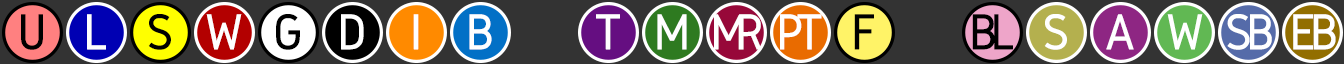
<style>
.page{position:relative;width:1344px;height:64px;background:#333333}
.page>*{position:absolute;margin:0}
.t1{font:52px "Gidole-Regular";color:#000000;font-weight:bold}
.t2{font:52px "Gidole-Regular";color:#ffffff;font-weight:bold}
.t3{font:52px "Gidole-Regular";letter-spacing:-0.23em;color:#ffffff;font-weight:bold}
.t4{font:52px "Gidole-Regular";letter-spacing:-0.16em;color:#ffffff;font-weight:bold}
.t5{font:52px "Gidole-Regular";letter-spacing:-0.14em;color:#000000;font-weight:bold}
.t6{font:52px "Gidole-Regular";letter-spacing:-0.12em;color:#ffffff;font-weight:bold}
</style>
<div class="page">
<p class="t1" style="left:21px;top:14px;width:22px;height:36px">U</p>
<p class="t2" style="left:87px;top:14px;width:19px;height:36px">L</p>
<p class="t1" style="left:148px;top:14px;width:23px;height:36px">S</p>
<p class="t2" style="left:206px;top:14px;width:36px;height:36px">W</p>
<p class="t1" style="left:276px;top:14px;width:24px;height:36px">G</p>
<p class="t2" style="left:341px;top:14px;width:23px;height:36px">D</p>
<p class="t2" style="left:413px;top:14px;width:6px;height:36px">I</p>
<p class="t2" style="left:469px;top:14px;width:23px;height:36px">B</p>
<p class="t2" style="left:596px;top:14px;width:24px;height:36px">T</p>
<p class="t2" style="left:657px;top:14px;width:30px;height:36px">M</p>
<p class="t3" style="left:714px;top:14px;width:48px;height:36px">MR</p>
<p class="t4" style="left:780px;top:14px;width:42px;height:36px">PT</p>
<p class="t1" style="left:854px;top:14px;width:20px;height:36px">F</p>
<p class="t5" style="left:972px;top:14px;width:41px;height:36px">BL</p>
<p class="t2" style="left:1044px;top:14px;width:23px;height:36px">S</p>
<p class="t2" style="left:1106px;top:14px;width:28px;height:36px">A</p>
<p class="t2" style="left:1167px;top:14px;width:36px;height:36px">W</p>
<p class="t6" style="left:1227px;top:14px;width:45px;height:36px">SB</p>
<p class="t6" style="left:1293px;top:14px;width:43px;height:36px">EB</p>
</div>
